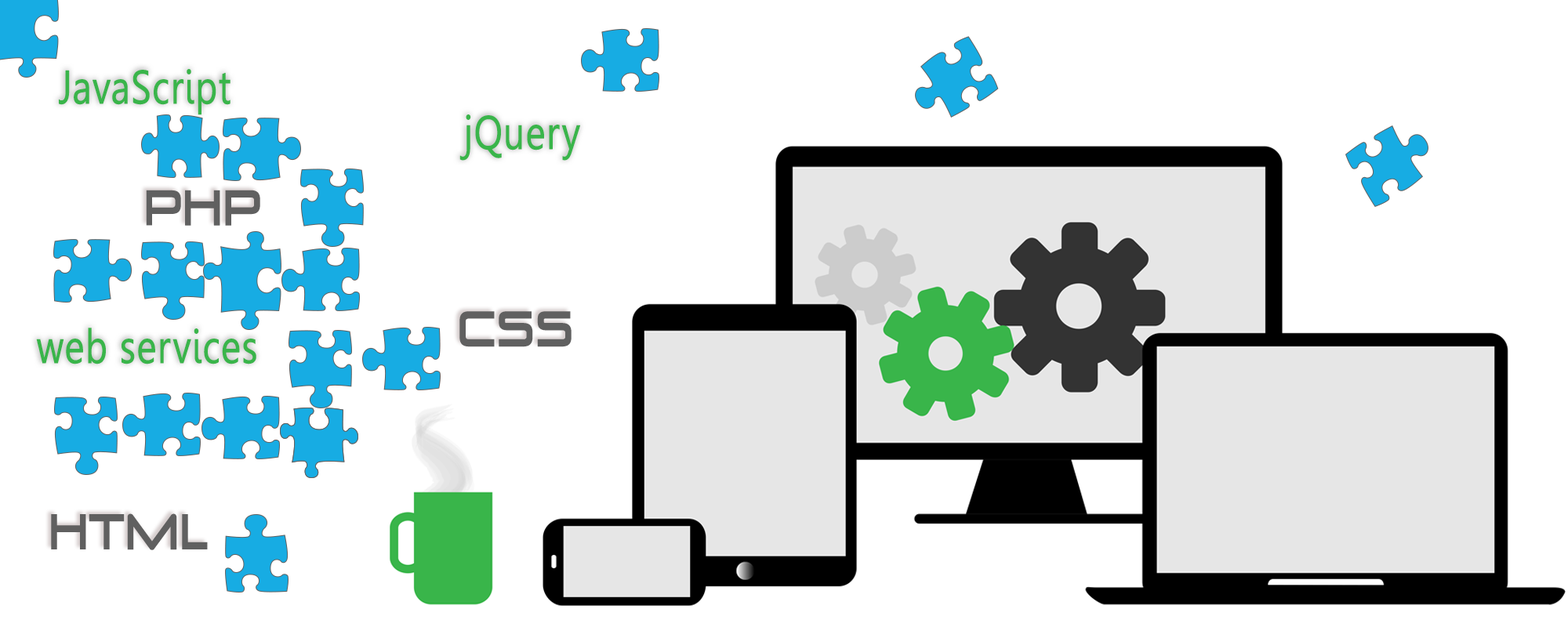
<style>
.page{position:relative;width:1568px;height:627px;background:#ffffff}
.page>*{position:absolute;margin:0}
.t1{font:47px "Leelawadee";color:#39b54a;font-weight:bold;scale:0.8 1}
.t2{font:47px "VenusRising-Regular";color:#606060;font-weight:bold;scale:0.8 1}
</style>
<div class="page">
<p class="t1" style="left:59px;top:69px;width:171px;height:46px">JavaScript</p>
<p class="t1" style="left:459px;top:114px;width:121px;height:47px">jQuery</p>
<p class="t2" style="left:146px;top:190px;width:114px;height:36px">PHP</p>
<p class="t2" style="left:459px;top:311px;width:113px;height:36px">css</p>
<p class="t1" style="left:36px;top:328px;width:220px;height:37px">web services</p>
<p class="t2" style="left:51px;top:514px;width:157px;height:36px">HTML</p>
</div>
